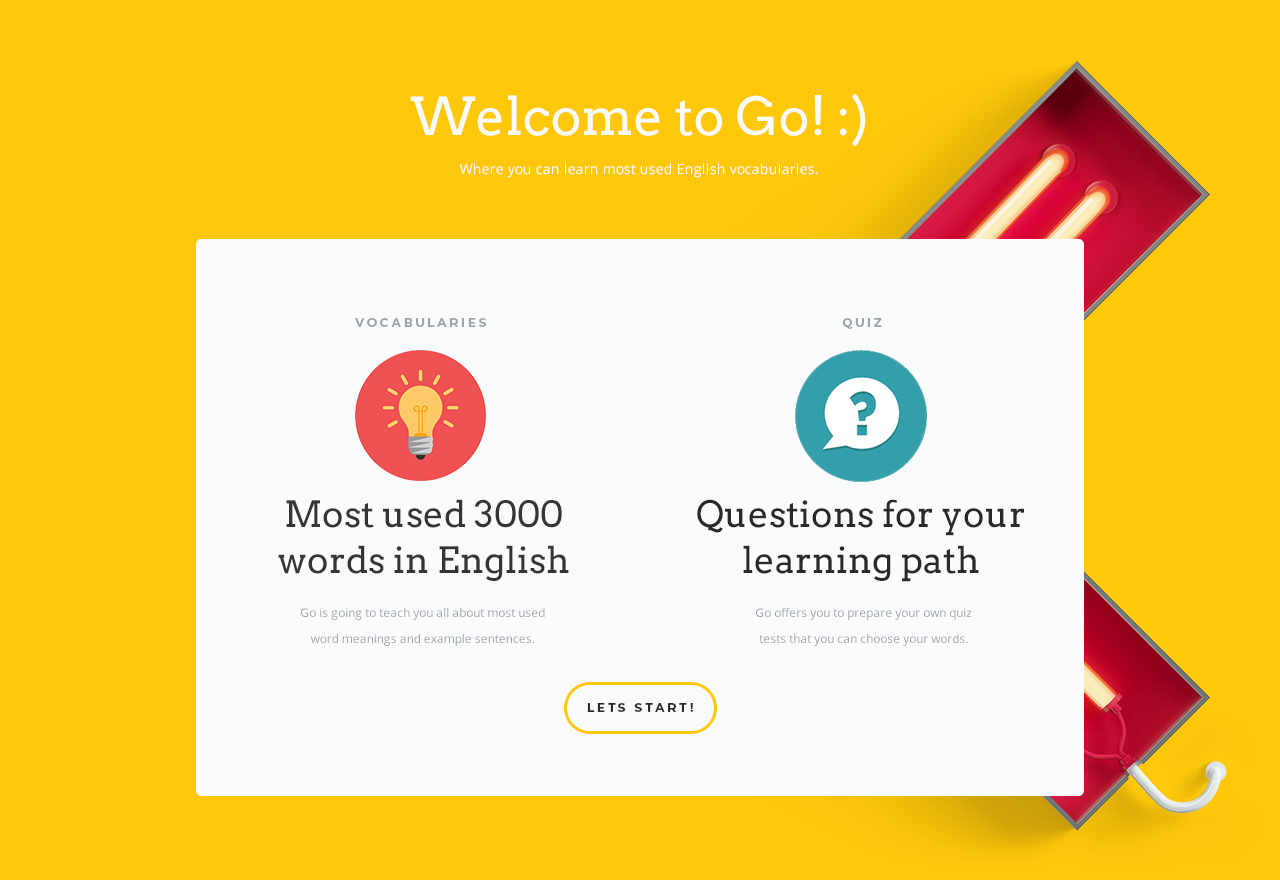
<style>
.page{position:relative;width:1280px;height:880px;background:#ffc80a}
.page>*{position:absolute;margin:0}
.t1{font:52px "Arvo";color:#fafbfd}
.t2{font:14px "OpenSans";color:#fafbfd}
.t3{font:12px "Montserrat-Bold";letter-spacing:0.24em;color:#9fa3a7;text-transform:uppercase}
.t4{font:36px/46px "Arvo";color:#353535}
.t5{font:36px/46px "Arvo";color:#292929}
.t6{font:12px/26px "OpenSans";color:#9fa3a7}
.t7{font:12px "Montserrat-Bold";letter-spacing:0.24em;color:#292929;text-transform:uppercase}
</style>
<div class="page">
<p class="t1" style="left:410px;top:93px;width:456px;height:54px">Welcome to Go! :)</p>
<p class="t2" style="left:460px;top:163px;width:358px;height:15px">Where you can learn most used English vocabularies.</p>
<p class="t3" style="left:355px;top:318px;width:132px;height:9px">Vocabularıes</p>
<p class="t3" style="left:842px;top:318px;width:40px;height:11px">Quiz</p>
<p class="t4" style="left:278px;top:499px;width:291px;height:82px;text-align:center">Most used 3000 words in English</p>
<p class="t5" style="left:697px;top:499px;width:327px;height:83px;text-align:center">Questions for your learning path</p>
<p class="t6" style="left:301px;top:608px;width:244px;height:38px;text-align:center">Go is going to teach you all about most used word meanings and example sentences.</p>
<p class="t6" style="left:756px;top:608px;width:216px;height:38px;text-align:center">Go offers you to prepare your own quiz tests that you can choose your words.</p>
<p class="t7" style="left:587px;top:703px;width:106px;height:9px">LETS START!</p>
</div>
